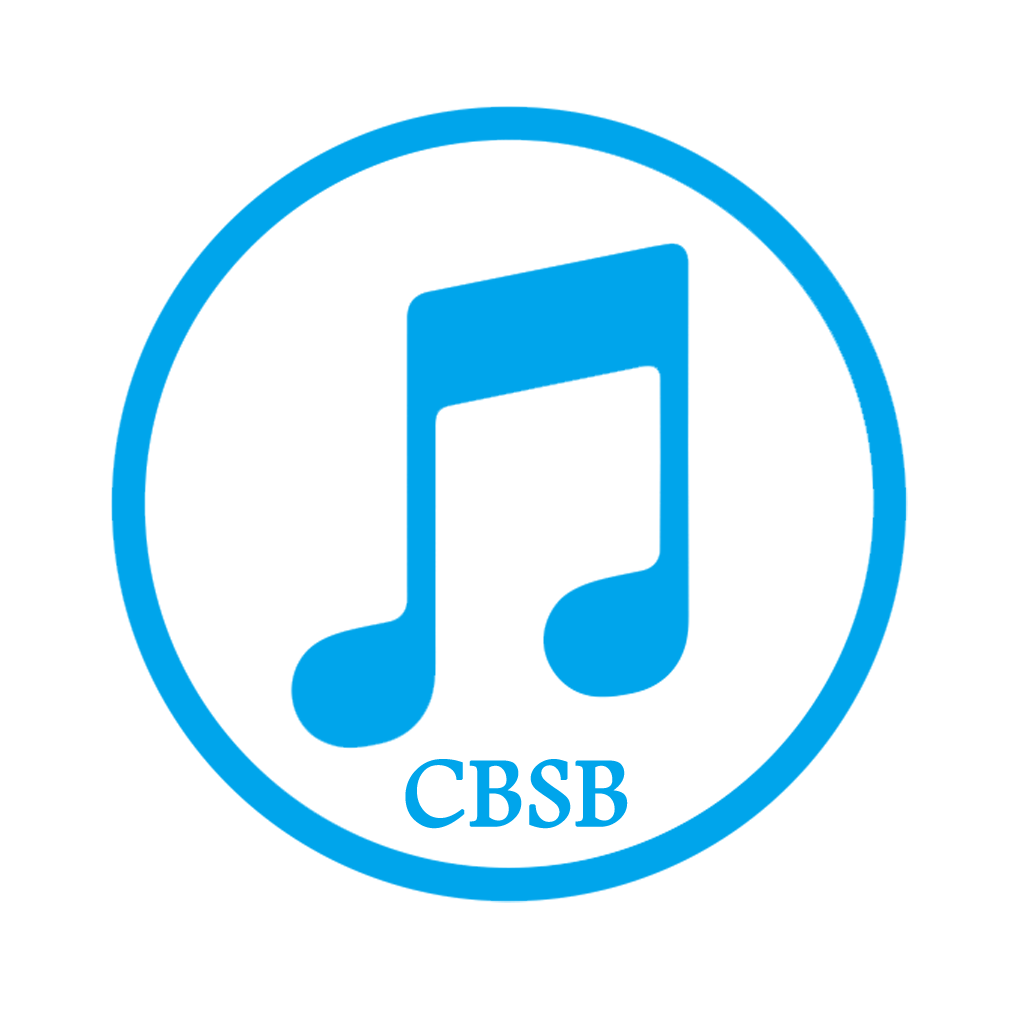
<style>
.page{position:relative;width:1024px;height:1024px;background:#ffffff}
.page>*{position:absolute;margin:0}
.t1{font:101.5px "FootlightMTLight";color:#00a5eb;font-weight:bold}
</style>
<div class="page">
<p class="t1" style="left:405px;top:759px;width:223px;height:70px">CBSB</p>
</div>
